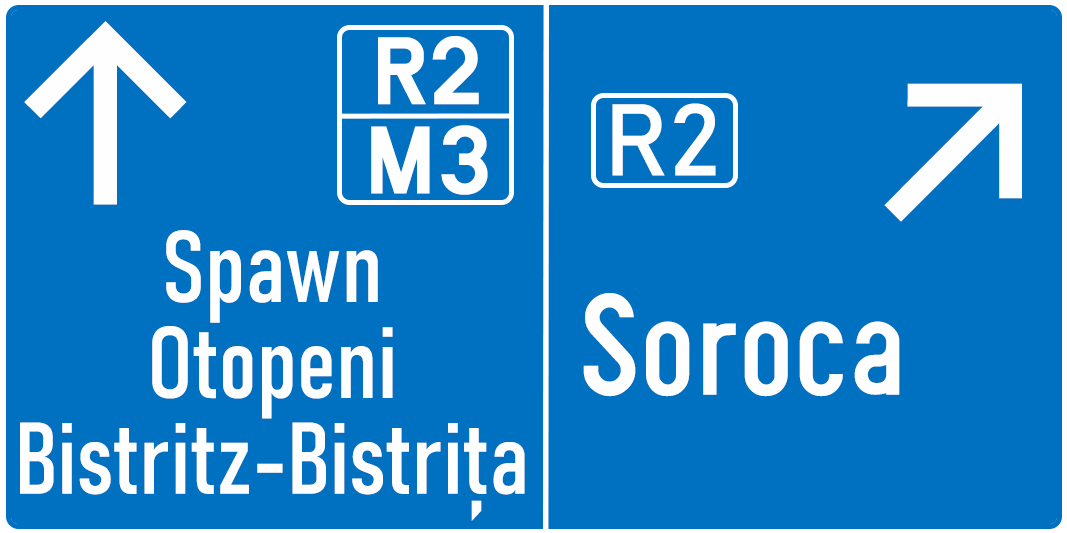
<style>
.page{position:relative;width:1067px;height:533px;background:#0070c0}
.page>*{position:absolute;margin:0}
.t1{font:250px "InterV-Medium";color:#fefefe}
.t2{font:100px "SnvD-Regu";color:#fefefe}
.t3{font:100px "Bahnschrift";color:#fefefe}
.t4{font:100px/95.8px "Bahnschrift-Condensed";color:#fefefe}
.t5{font:150px "SnvBeckerRegCond";color:#fefefe}
</style>
<div class="page">
<p class="t1" style="left:24px;top:21px;width:163px;height:184px">↑</p>
<p class="t2" style="left:378px;top:36px;width:101px;height:69px">R2</p>
<p class="t1" style="left:884px;top:83px;width:138px;height:139px">↗</p>
<p class="t3" style="left:612px;top:103px;width:104px;height:73px">R2</p>
<p class="t2" style="left:371px;top:125px;width:117px;height:70px">M3</p>
<p class="t4" style="left:20px;top:230px;width:505px;height:291px;text-align:center">Spawn<br>Otopeni<br>Bistritz-Bistrița</p>
<p class="t5" style="left:583px;top:293px;width:317px;height:104px">Soroca</p>
</div>
